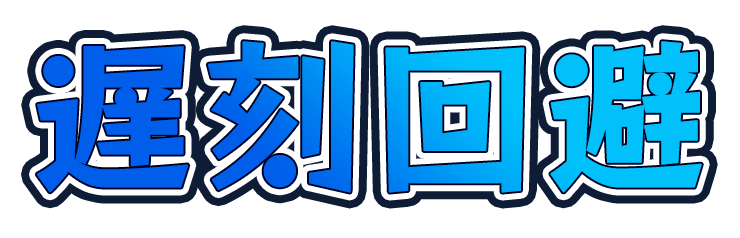
<style>
.page{position:relative;width:740px;height:238px;background:#ffffff}
.page>*{position:absolute;margin:0}
.t1{font:166.7px "RocknRollOne-Regular";font-weight:bold}
</style>
<div class="page">
<p class="t1" style="left:37px;top:41px;width:665px;height:152px">遅刻回避</p>
</div>
